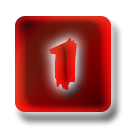
<style>
.page{position:relative;width:128px;height:128px;background:#ffffff}
.page>*{position:absolute;margin:0}
.t1{font:80px "ZombieA"}
</style>
<div class="page">
<p class="t1" style="left:48px;top:37px;width:29px;height:53px">1</p>
</div>
